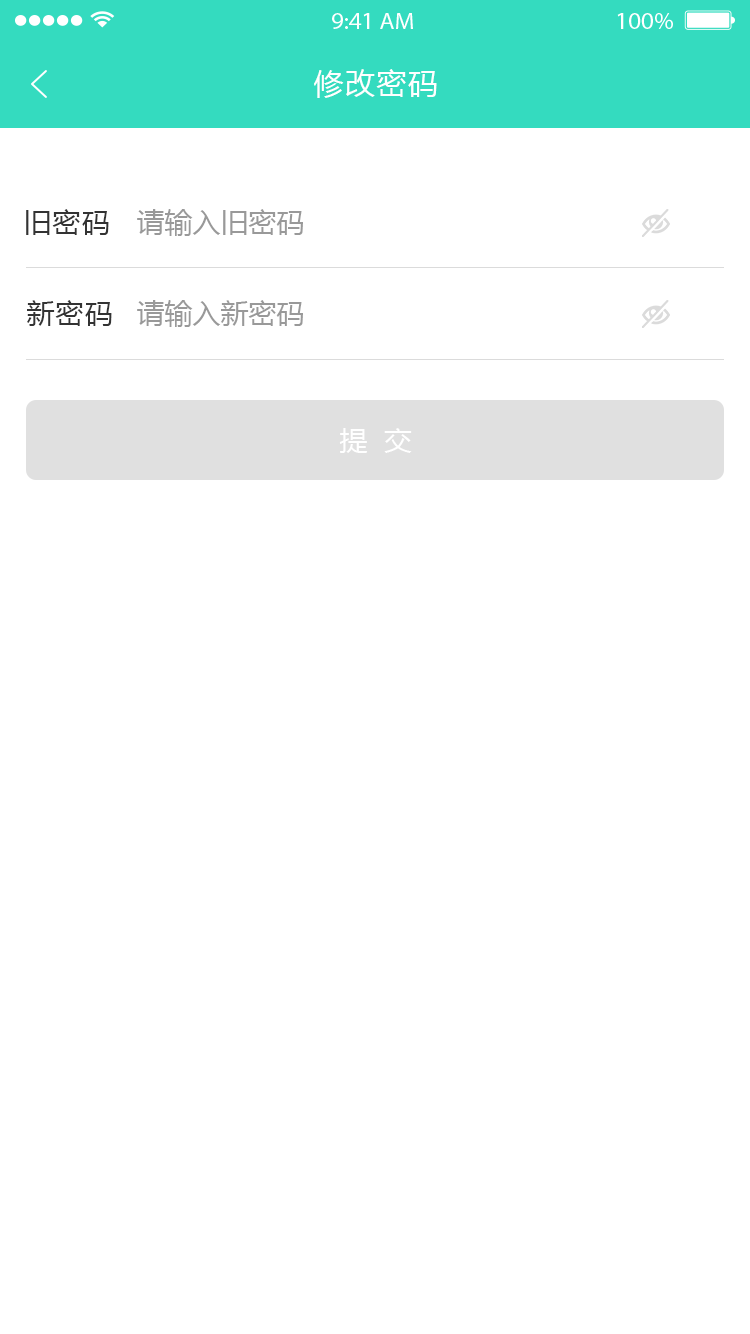
<style>
.page{position:relative;width:750px;height:1334px;background:#ffffff}
.page>*{position:absolute;margin:0}
.t1{font:30px "MicrosoftYaHei";letter-spacing:0.05em;color:#ffffff}
.t2{font:28px "MicrosoftYaHei";letter-spacing:0.05em;color:#333333}
.t3{font:28px "MicrosoftYaHei";color:#999999}
.t4{font:28px "MicrosoftYaHei";color:#ffffff}
</style>
<div class="page">
<p class="t1" style="left:314px;top:69px;width:123px;height:29px">修改密码</p>
<p class="t2" style="left:26px;top:209px;width:83px;height:26px">旧密码</p>
<p class="t3" style="left:137px;top:209px;width:166px;height:27px">请输入旧密码</p>
<p class="t2" style="left:27px;top:300px;width:85px;height:26px">新密码</p>
<p class="t3" style="left:137px;top:300px;width:166px;height:27px">请输入新密码</p>
<p class="t4" style="left:339px;top:428px;width:73px;height:25px">提  交</p>
</div>
